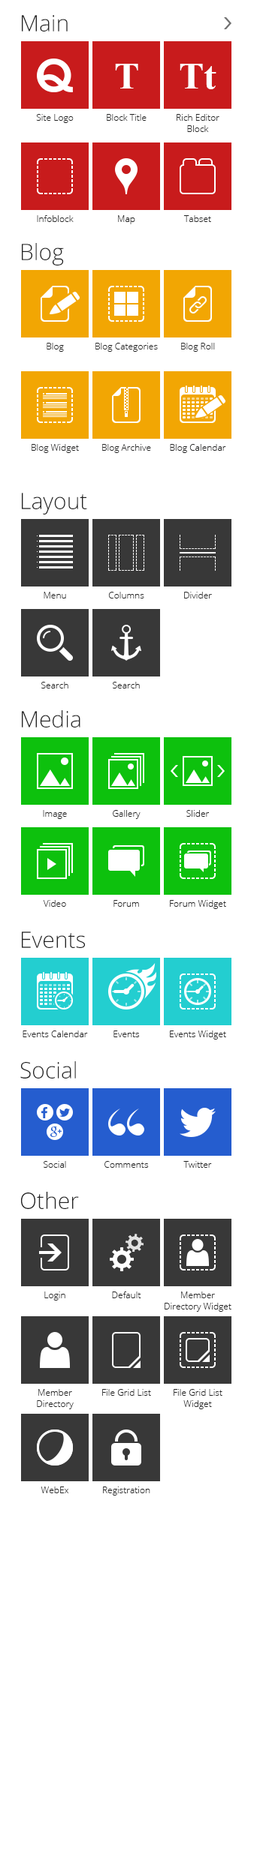
<style>
.page{position:relative;width:254px;height:1875px;background:#ffffff}
.page>*{position:absolute;margin:0}
.t1{font:22.5px "OpenSans-Light";color:#232323}
.t2{font:37.5px "TimesNewRomanPS-BoldMT";color:#ffffff}
.t3{font:9px "OpenSans-Light";color:#232323}
</style>
<div class="page">
<p class="t1" style="left:22px;top:15px;width:46px;height:17px">Main</p>
<p class="t2" style="left:115px;top:64px;width:23px;height:24px">T</p>
<p class="t2" style="left:179px;top:64px;width:37px;height:25px">Tt</p>
<p class="t3" style="left:36px;top:114px;width:38px;height:9px">Site Logo</p>
<p class="t3" style="left:106px;top:114px;width:40px;height:7px">Block Title</p>
<p class="t3" style="left:176px;top:114px;width:43px;height:18px;text-align:center">Rich Editor<br>Block</p>
<p class="t3" style="left:37px;top:215px;width:37px;height:7px">Infoblock</p>
<p class="t3" style="left:118px;top:215px;width:17px;height:9px">Map</p>
<p class="t3" style="left:183px;top:215px;width:28px;height:7px">Tabset</p>
<p class="t1" style="left:22px;top:243px;width:42px;height:23px">Blog</p>
<p class="t3" style="left:46px;top:343px;width:18px;height:9px">Blog</p>
<p class="t3" style="left:95px;top:343px;width:63px;height:9px">Blog Categories</p>
<p class="t3" style="left:181px;top:343px;width:33px;height:9px">Blog Roll</p>
<p class="t3" style="left:32px;top:444px;width:47px;height:9px">Blog Widget</p>
<p class="t3" style="left:102px;top:444px;width:49px;height:9px">Blog Archive</p>
<p class="t3" style="left:170px;top:444px;width:56px;height:9px">Blog Calendar</p>
<p class="t1" style="left:22px;top:493px;width:65px;height:21px">Layout</p>
<p class="t3" style="left:44px;top:592px;width:22px;height:6px">Menu</p>
<p class="t3" style="left:108px;top:592px;width:36px;height:6px">Columns</p>
<p class="t3" style="left:184px;top:592px;width:28px;height:6px">Divider</p>
<p class="t3" style="left:41px;top:682px;width:27px;height:6px">Search</p>
<p class="t3" style="left:112px;top:682px;width:28px;height:6px">Search</p>
<p class="t1" style="left:22px;top:710px;width:58px;height:18px">Media</p>
<p class="t3" style="left:43px;top:810px;width:24px;height:9px">Image</p>
<p class="t3" style="left:112px;top:810px;width:28px;height:9px">Gallery</p>
<p class="t3" style="left:186px;top:810px;width:22px;height:7px">Slider</p>
<p class="t3" style="left:43px;top:900px;width:23px;height:7px">Video</p>
<p class="t3" style="left:113px;top:900px;width:26px;height:7px">Forum</p>
<p class="t3" style="left:170px;top:900px;width:56px;height:9px">Forum Widget</p>
<p class="t1" style="left:22px;top:932px;width:63px;height:16px">Events</p>
<p class="t3" style="left:22px;top:1030px;width:66px;height:7px">Events Calendar</p>
<p class="t3" style="left:113px;top:1030px;width:27px;height:7px">Events</p>
<p class="t3" style="left:170px;top:1030px;width:56px;height:10px">Events Widget</p>
<p class="t1" style="left:20px;top:1061px;width:56px;height:17px">Social</p>
<p class="t3" style="left:44px;top:1161px;width:22px;height:7px">Social</p>
<p class="t3" style="left:104px;top:1161px;width:44px;height:7px">Comments</p>
<p class="t3" style="left:183px;top:1161px;width:29px;height:7px">Twitter</p>
<p class="t1" style="left:21px;top:1192px;width:58px;height:17px">Other</p>
<p class="t3" style="left:44px;top:1292px;width:21px;height:8px">Login</p>
<p class="t3" style="left:112px;top:1292px;width:29px;height:6px">Default</p>
<p class="t3" style="left:164px;top:1292px;width:67px;height:20px;text-align:center">Member Directory Widget</p>
<p class="t3" style="left:37px;top:1389px;width:37px;height:20px;text-align:center">Member Directory</p>
<p class="t3" style="left:102px;top:1389px;width:49px;height:7px">File Grid List</p>
<p class="t3" style="left:173px;top:1389px;width:49px;height:20px;text-align:center">File Grid List Widget</p>
<p class="t3" style="left:40px;top:1486px;width:29px;height:7px">WebEx</p>
<p class="t3" style="left:103px;top:1486px;width:47px;height:10px">Registration</p>
</div>
